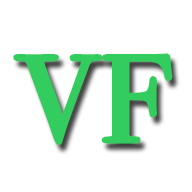
<style>
.page{position:relative;width:192px;height:192px;background:#ffffff}
.page>*{position:absolute;margin:0}
.t1{font:121.3px "BodoniSvtyTwoITCTT-Book";color:#33cd5f;font-weight:bold;scale:1.04 1}
</style>
<div class="page">
<p class="t1" style="left:13px;top:53px;width:160px;height:92px">VF</p>
</div>
